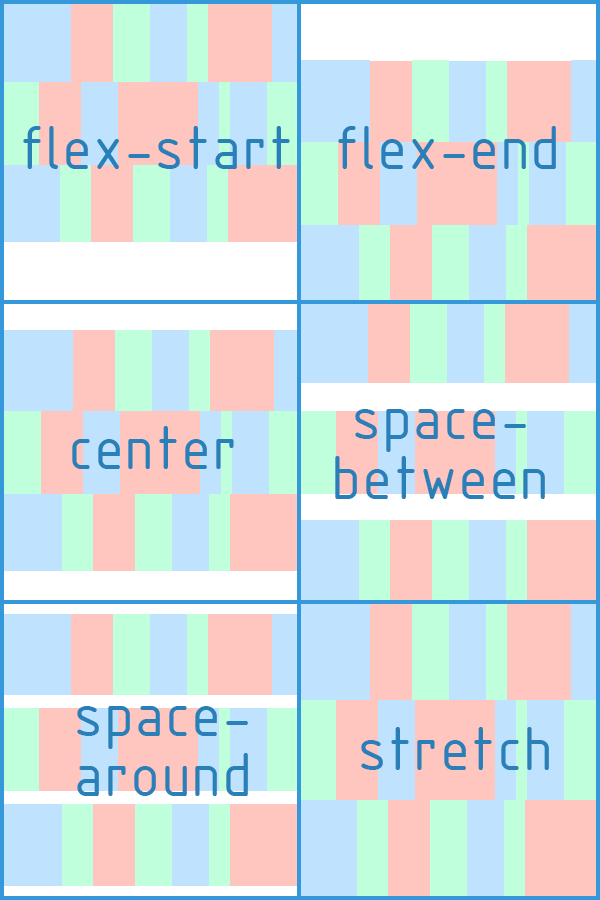
<style>
.page{position:relative;width:600px;height:900px;background:#ffc5bf}
.page>*{position:absolute;margin:0}
.t1{font:66.9px "ISOCPEUR";letter-spacing:0.006em;color:#2980b9}
.t2{font:66.9px/59.8px "ISOCPEUR";letter-spacing:0.006em;color:#2980b9}
</style>
<div class="page">
<p class="t1" style="left:23px;top:126px;width:267px;height:43px">flex-start</p>
<p class="t1" style="left:338px;top:126px;width:218px;height:43px">flex-end</p>
<p class="t2" style="left:335px;top:409px;width:210px;height:90px;text-align:center">space-<br>between</p>
<p class="t1" style="left:72px;top:426px;width:162px;height:43px">center</p>
<p class="t2" style="left:77px;top:706px;width:171px;height:90px;text-align:center">space-<br>around</p>
<p class="t1" style="left:361px;top:727px;width:188px;height:43px">stretch</p>
</div>
